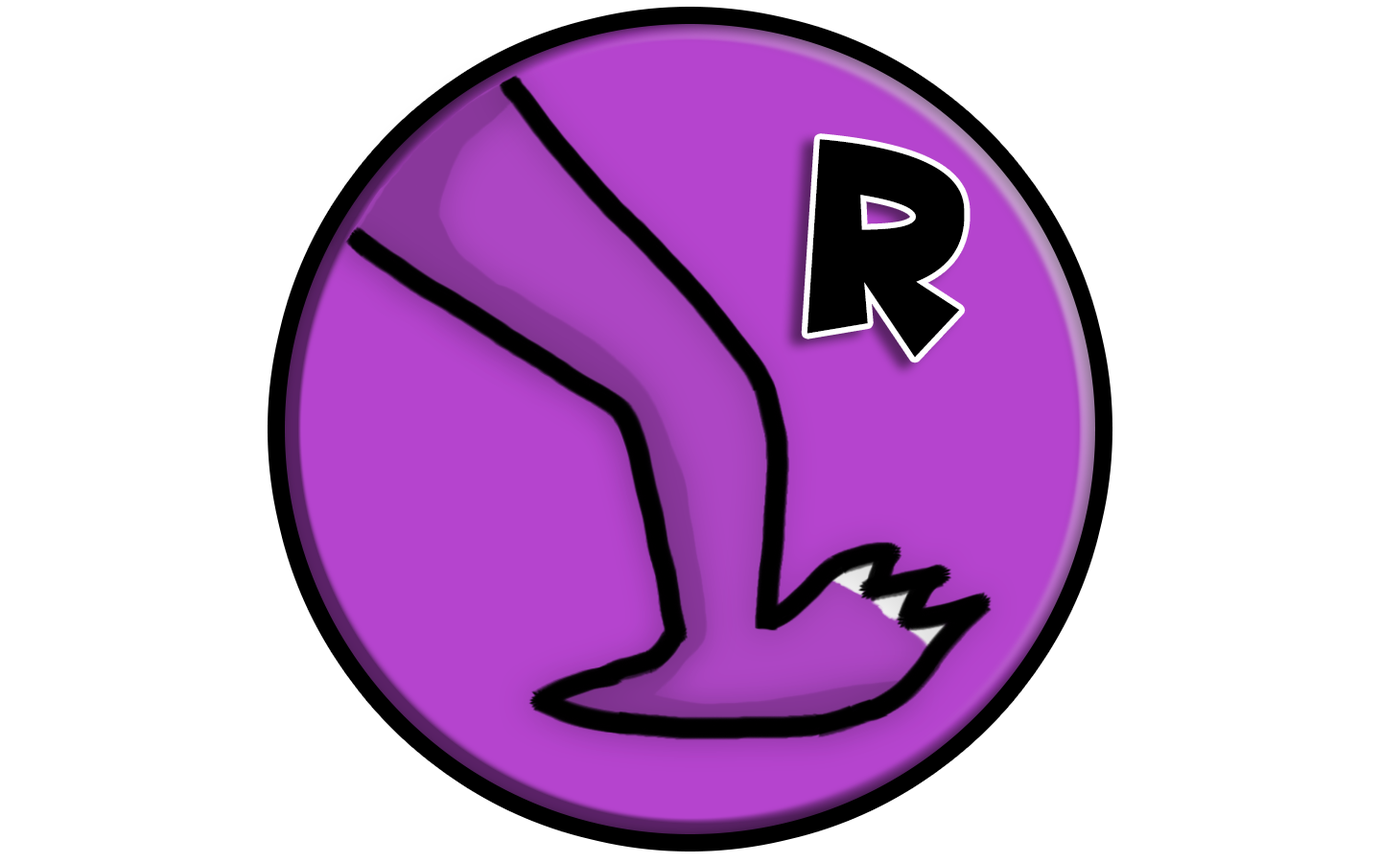
<style>
.page{position:relative;width:1381px;height:863px;background:#ffffff}
.page>*{position:absolute;margin:0}
.t1{font:266.1px "Funhouse";color:#000000;scale:0.83 1}
</style>
<div class="page">
<p class="t1" style="left:807px;top:139px;width:158px;height:219px">R</p>
</div>
